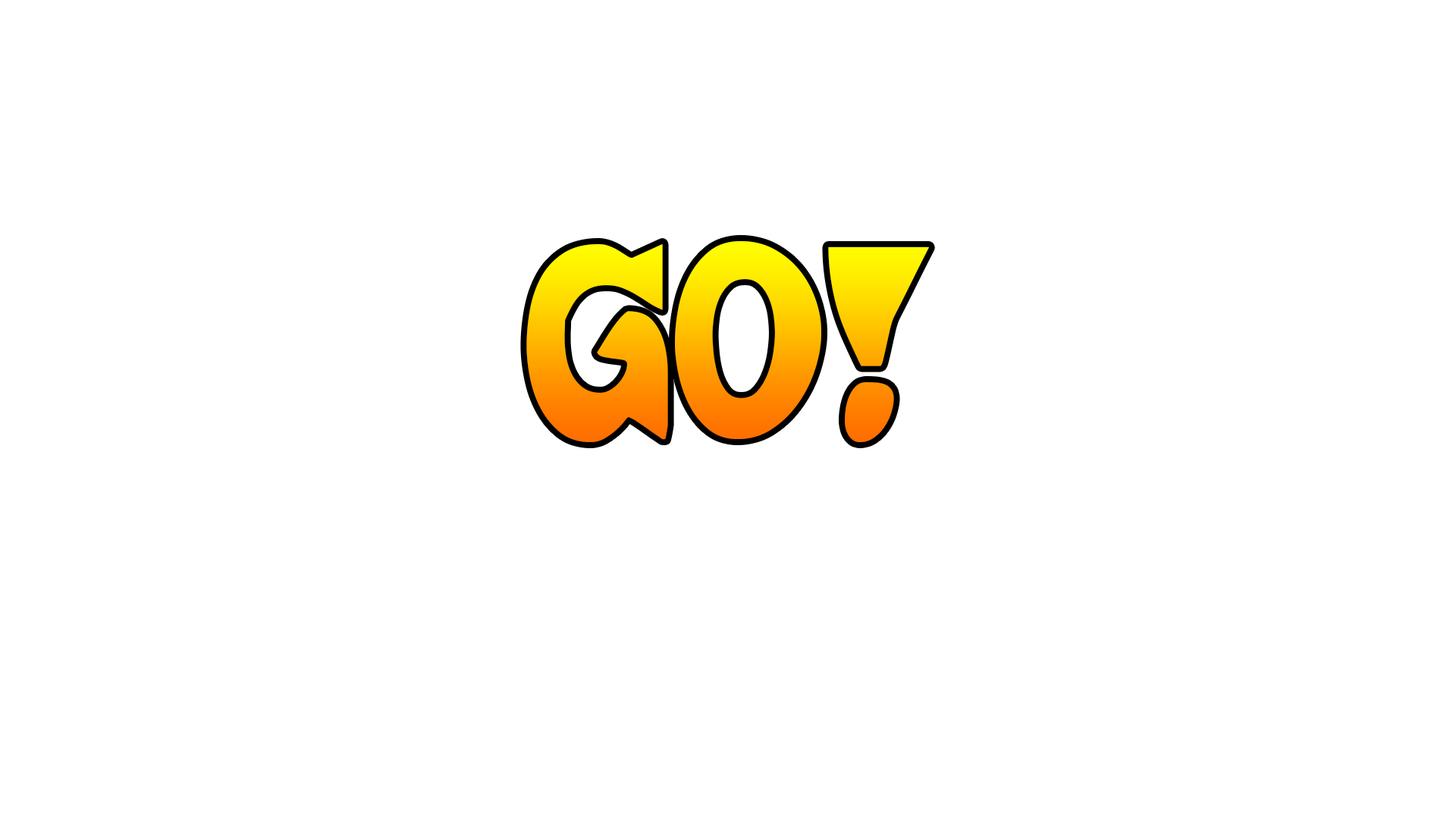
<style>
.page{position:relative;width:1456px;height:819px;background:#ffffff}
.page>*{position:absolute;margin:0}
.t1{font:379.2px "Crash-a-Like"}
</style>
<div class="page">
<p class="t1" style="left:526px;top:240px;width:403px;height:202px">Go!</p>
</div>
